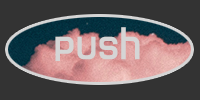
<style>
.page{position:relative;width:200px;height:100px;background:#333333}
.page>*{position:absolute;margin:0}
.t1{font:34.2px "KoreanYNMYT-L";color:#d5d5d5;font-weight:bold;scale:0.95 1}
</style>
<div class="page">
<p class="t1" style="left:55px;top:27px;width:85px;height:34px">push</p>
</div>
